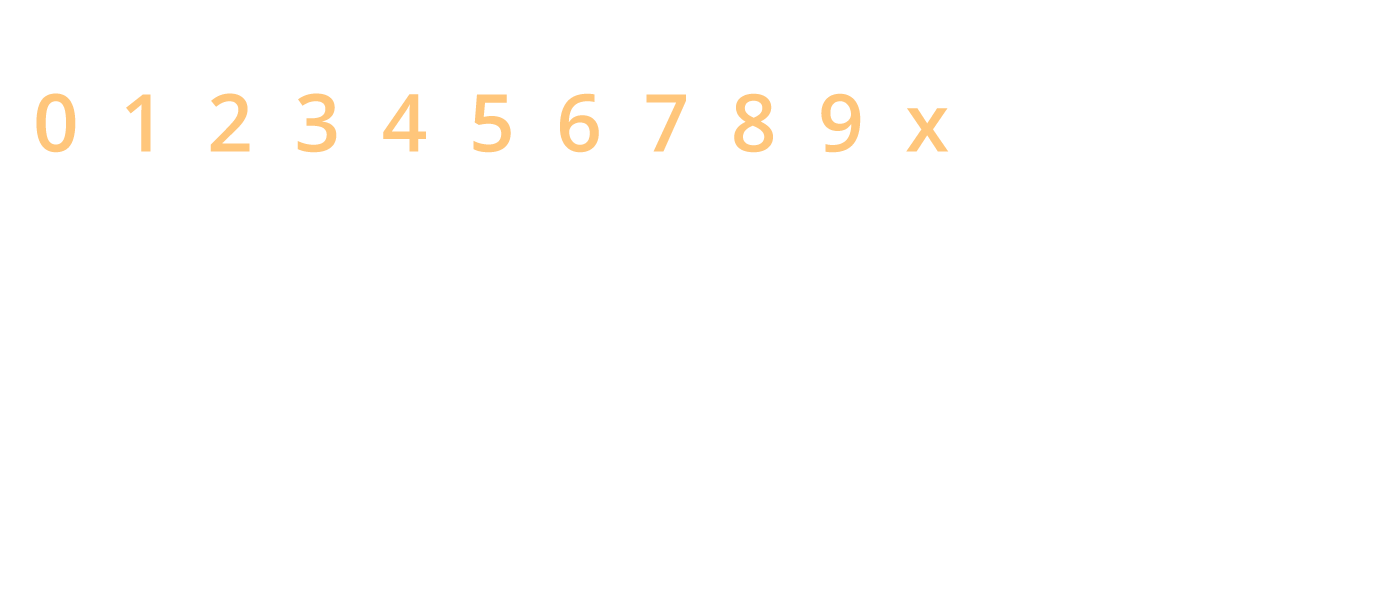
<style>
.page{position:relative;width:1400px;height:600px;background:#ffffff}
.page>*{position:absolute;margin:0}
.t1{font:80px "OpenSans-Semibold";color:#ffc67b}
</style>
<div class="page">
<p class="t1" style="left:36px;top:93px;width:913px;height:60px">0  1  2  3  4  5  6  7  8  9  x</p>
</div>
